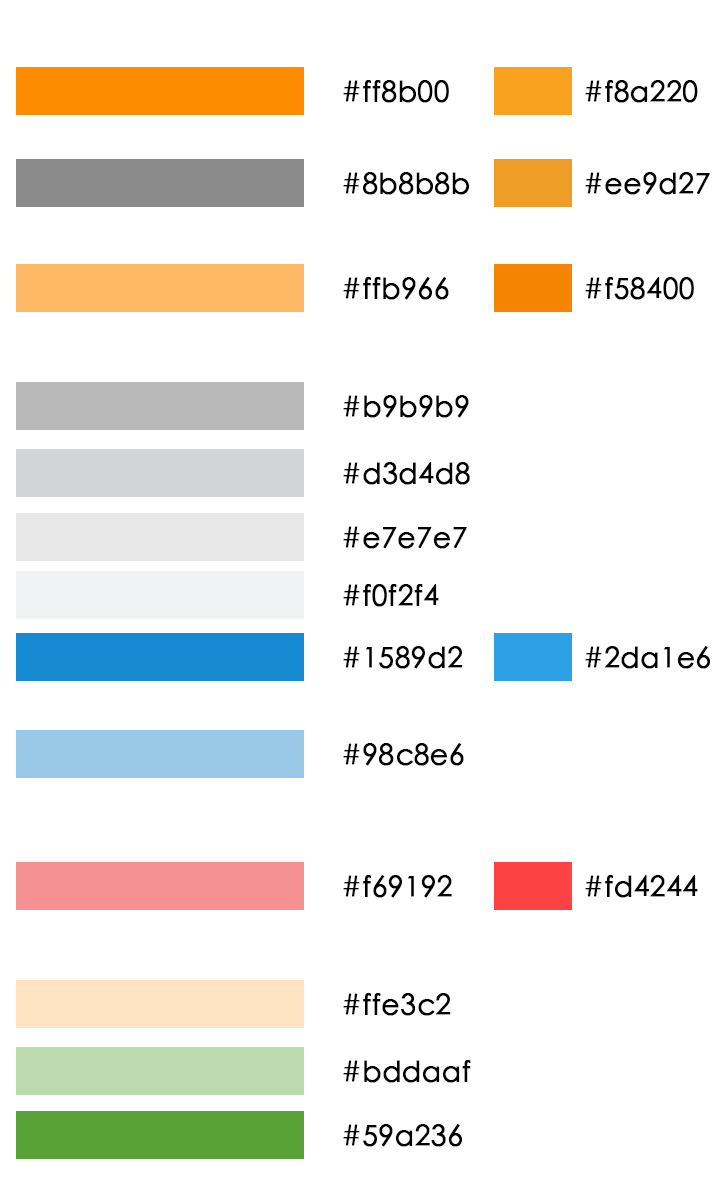
<style>
.page{position:relative;width:720px;height:1184px;background:#ffffff}
.page>*{position:absolute;margin:0}
.t1{font:28px "STXihei";color:#000000;font-weight:bold}
</style>
<div class="page">
<p class="t1" style="left:343px;top:80px;width:106px;height:23px">#ff8b00</p>
<p class="t1" style="left:585px;top:80px;width:113px;height:23px">#f8a220</p>
<p class="t1" style="left:343px;top:172px;width:126px;height:23px">#8b8b8b</p>
<p class="t1" style="left:585px;top:172px;width:125px;height:23px">#ee9d27</p>
<p class="t1" style="left:343px;top:277px;width:106px;height:23px">#ffb966</p>
<p class="t1" style="left:585px;top:277px;width:109px;height:23px">#f58400</p>
<p class="t1" style="left:343px;top:395px;width:126px;height:23px">#b9b9b9</p>
<p class="t1" style="left:343px;top:462px;width:127px;height:23px">#d3d4d8</p>
<p class="t1" style="left:343px;top:526px;width:124px;height:23px">#e7e7e7</p>
<p class="t1" style="left:343px;top:584px;width:96px;height:23px">#f0f2f4</p>
<p class="t1" style="left:343px;top:646px;width:120px;height:23px">#1589d2</p>
<p class="t1" style="left:585px;top:646px;width:125px;height:23px">#2da1e6</p>
<p class="t1" style="left:343px;top:743px;width:121px;height:23px">#98c8e6</p>
<p class="t1" style="left:343px;top:875px;width:109px;height:23px">#f69192</p>
<p class="t1" style="left:585px;top:875px;width:113px;height:23px">#fd4244</p>
<p class="t1" style="left:343px;top:993px;width:108px;height:23px">#ffe3c2</p>
<p class="t1" style="left:343px;top:1060px;width:128px;height:23px">#bddaaf</p>
<p class="t1" style="left:343px;top:1124px;width:119px;height:23px">#59a236</p>
</div>
